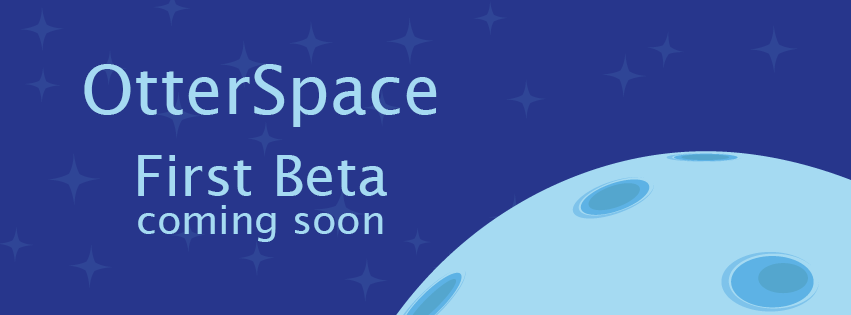
<style>
.page{position:relative;width:851px;height:315px;background:#27368c}
.page>*{position:absolute;margin:0}
.t1{font:68px "LucidaSans";color:#a5daf2}
.t2{font:39.8px/37.7px "LucidaSans";color:#a5daf2}
.t3{font:56.9px/86px "LucidaSans";color:#a5daf2}
</style>
<div class="page">
<p class="t1" style="left:84px;top:64px;width:353px;height:63px">OtterSpace</p>
<p class="t2" style="left:138px;top:155px;width:249px;height:87px;text-align:center"><span class="t3">First Beta<br></span>coming soon</p>
</div>
